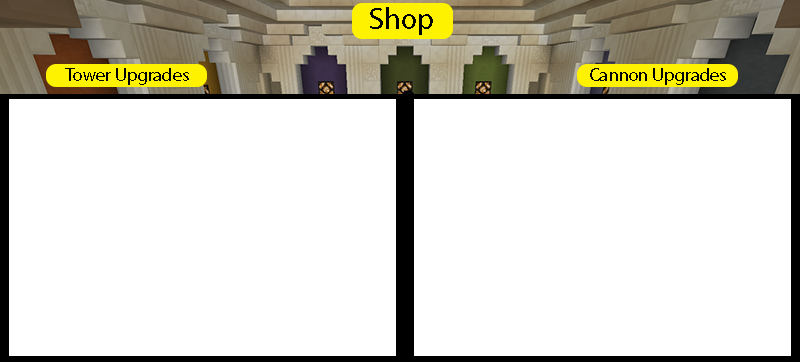
<style>
.page{position:relative;width:800px;height:362px;background:#ffffff}
.page>*{position:absolute;margin:0}
.t1{font:18px "MyriadPro-Regular";color:#000000}
</style>
<div class="page">
<p class="t1" style="left:65px;top:68px;width:124px;height:17px">Tower Upgrades</p>
<p class="t1" style="left:590px;top:68px;width:136px;height:17px">Cannon Upgrades</p>
</div>
